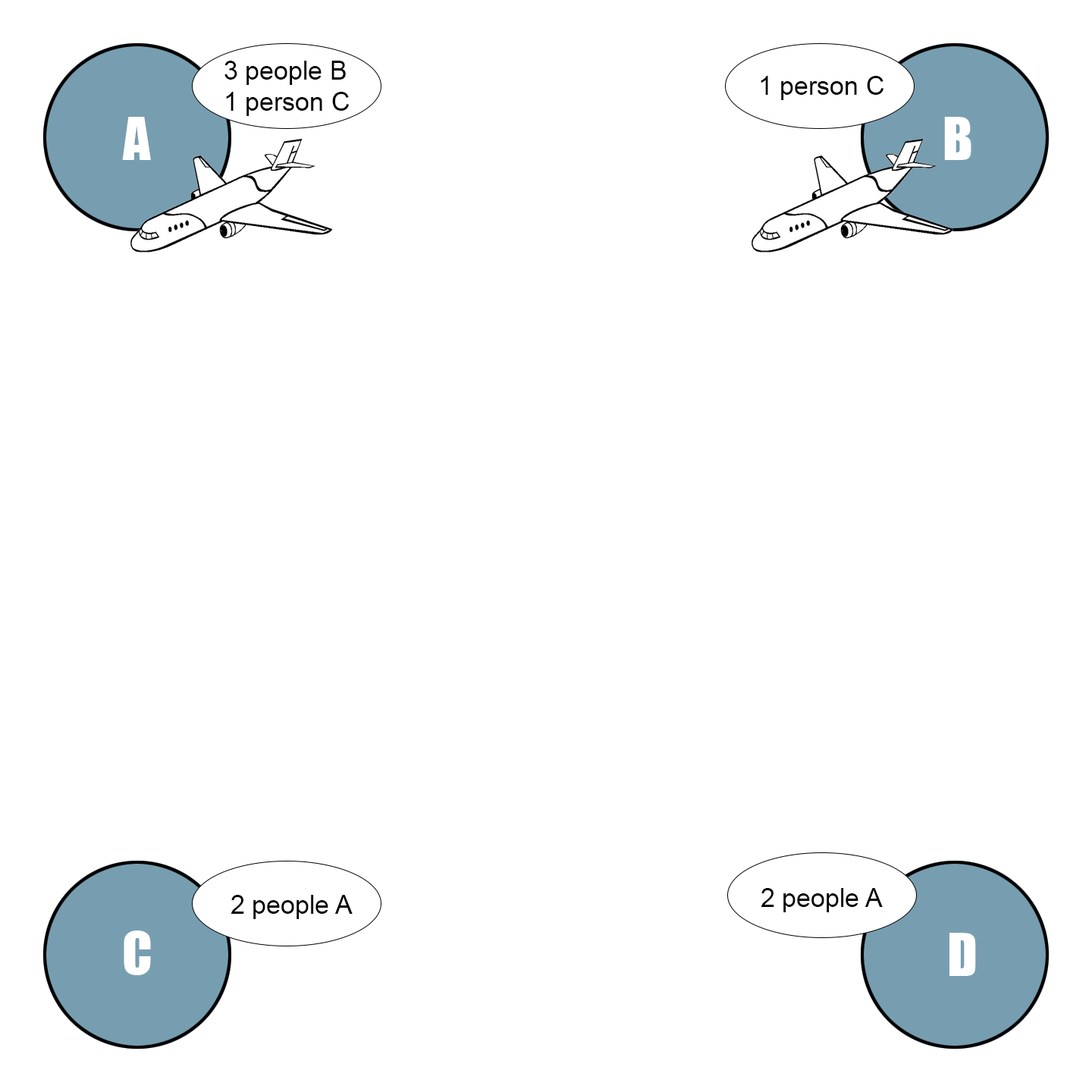
<style>
.page{position:relative;width:1092px;height:1092px;background:#ffffff}
.page>*{position:absolute;margin:0}
.t1{font:25.8px "ArialMT";color:#000000}
</style>
<div class="page">
<p class="t1" style="left:224px;top:61px;width:126px;height:55px">3 people B<br>1 person C</p>
<p class="t1" style="left:761px;top:76px;width:123px;height:24px">1 person C</p>
<p class="t1" style="left:761px;top:888px;width:122px;height:24px">2 people A</p>
<p class="t1" style="left:231px;top:895px;width:122px;height:24px">2 people A</p>
</div>
